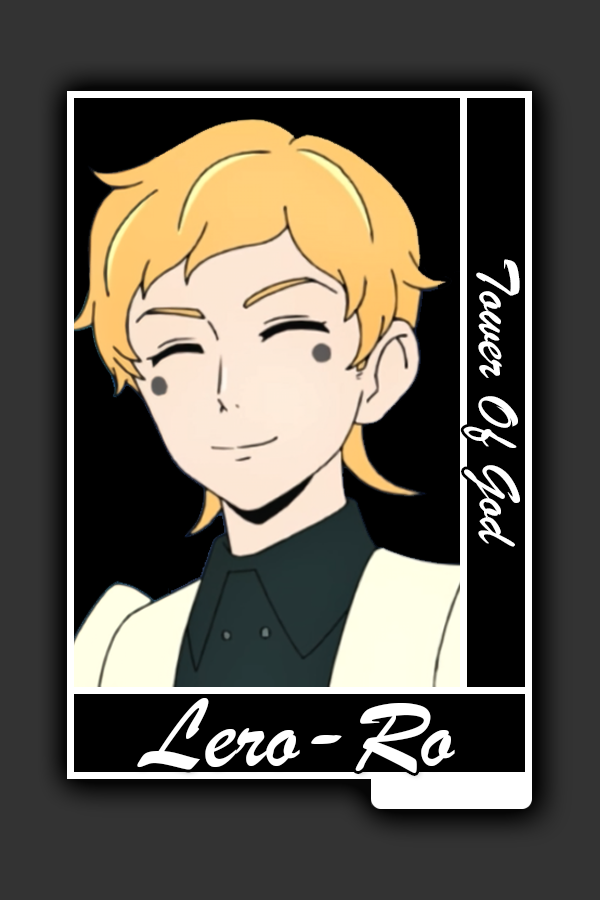
<style>
.page{position:relative;width:600px;height:900px;background:#333333}
.page>*{position:absolute;margin:0}
.t1{font:61.5px "BrushScriptMT";color:#ffffff}
.t2{font:104.4px "BrushScriptMT";color:#ffffff}
</style>
<div class="page">
<p class="t1" style="left:463px;top:259px;width:57px;height:288px;rotate:90deg">Tower Of God</p>
<p class="t2" style="left:137px;top:698px;width:318px;height:75px">Lero-Ro</p>
</div>
